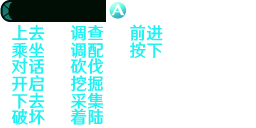
<style>
.page{position:relative;width:256px;height:128px;background:#ffffff}
.page>*{position:absolute;margin:0}
.t1{font:17.3px/17.3px "HYWenHei-FEW";letter-spacing:0.025em;color:#23f1f1;scale:0.95 1}
.t2{font:17.3px/16px "HYWenHei-FEW";letter-spacing:0.025em;color:#23f1f1;scale:0.95 1}
</style>
<div class="page">
<p class="t1" style="left:11px;top:24px;width:34px;height:101px;text-align:center">上去<br><span class="t2">乘坐<br></span>对话<br>开启<br><span class="t2">下去<br>破坏</span></p>
<p class="t1" style="left:70px;top:25px;width:34px;height:100px;text-align:center">调查<br><span class="t2">调配<br></span>砍伐<br>挖掘<br><span class="t2">采集<br>着陆</span></p>
<p class="t1" style="left:129px;top:24px;width:34px;height:34px;text-align:center">前进<br>按下</p>
</div>
